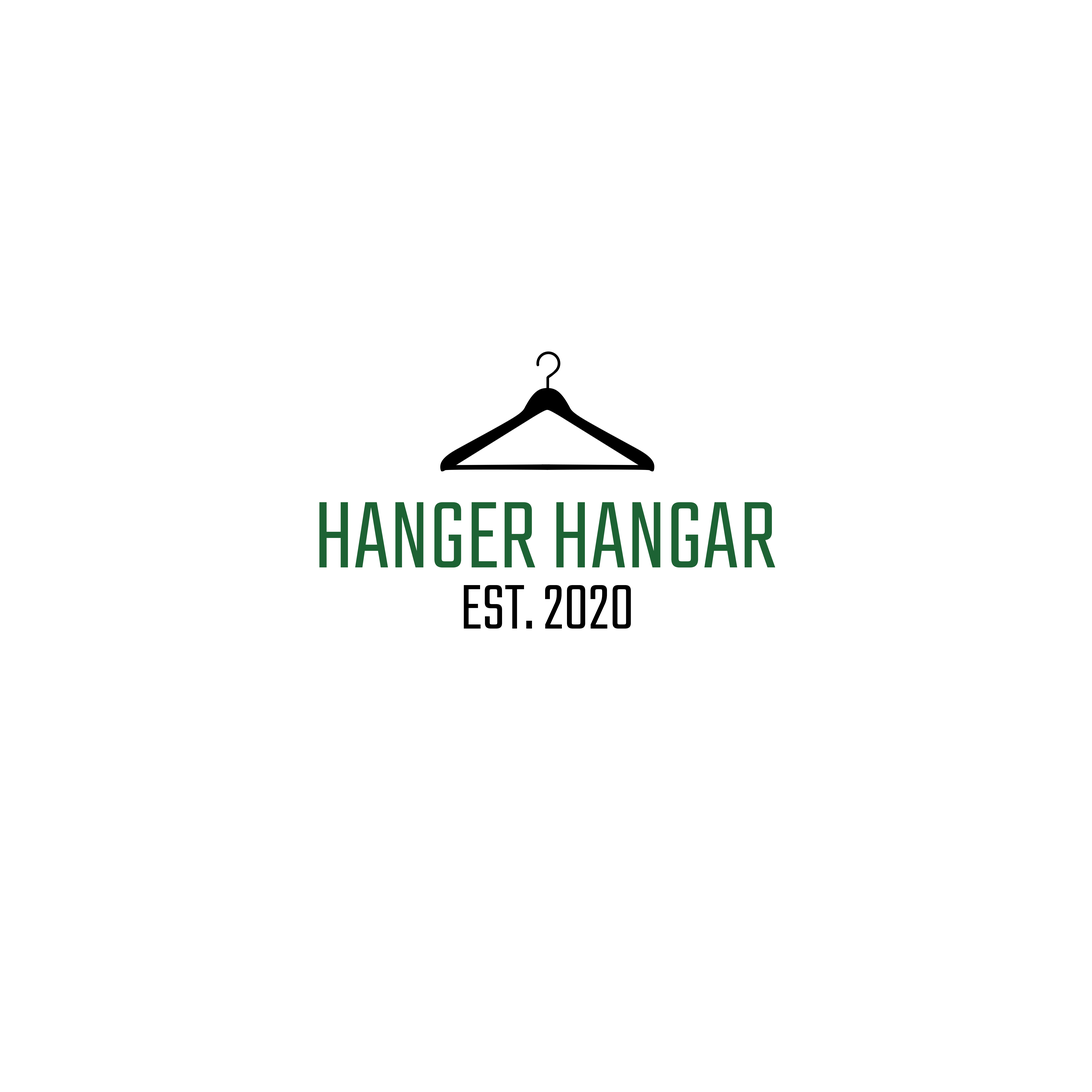
<style>
.page{position:relative;width:1092px;height:1092px;background:#ffffff}
.page>*{position:absolute;margin:0}
.t1{font:104.8px "Teko-Light";color:#1d6334}
.t2{font:69.9px "Teko-Light";color:#000000}
</style>
<div class="page">
<p class="t1" style="left:319px;top:502px;width:456px;height:66px">HANGER HANGAR</p>
<p class="t2" style="left:464px;top:585px;width:167px;height:44px">EST. 2020</p>
</div>
